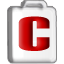
<style>
.page{position:relative;width:64px;height:64px;background:#ffffff}
.page>*{position:absolute;margin:0}
.t1{font:48px "Haettenschweiler";scale:1.9 1}
</style>
<div class="page">
<p class="t1" style="left:18px;top:16px;width:32px;height:35px">C</p>
</div>
